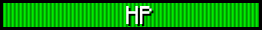
<style>
.page{position:relative;width:262px;height:30px;background:#00ae00}
.page>*{position:absolute;margin:0}
.t1{font:20.5px "Minecraftia";color:#ffffff;scale:0.9 1}
</style>
<div class="page">
<p class="t1" style="left:126px;top:6px;width:26px;height:18px">HP</p>
</div>
